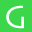
<style>
.page{position:relative;width:32px;height:32px;background:#3cd64b}
.page>*{position:absolute;margin:0}
.t1{font:33.3px "Skia-Regular";color:#fefefe}
</style>
<div class="page">
<p class="t1" style="left:6px;top:5px;width:18px;height:24px">G</p>
</div>
